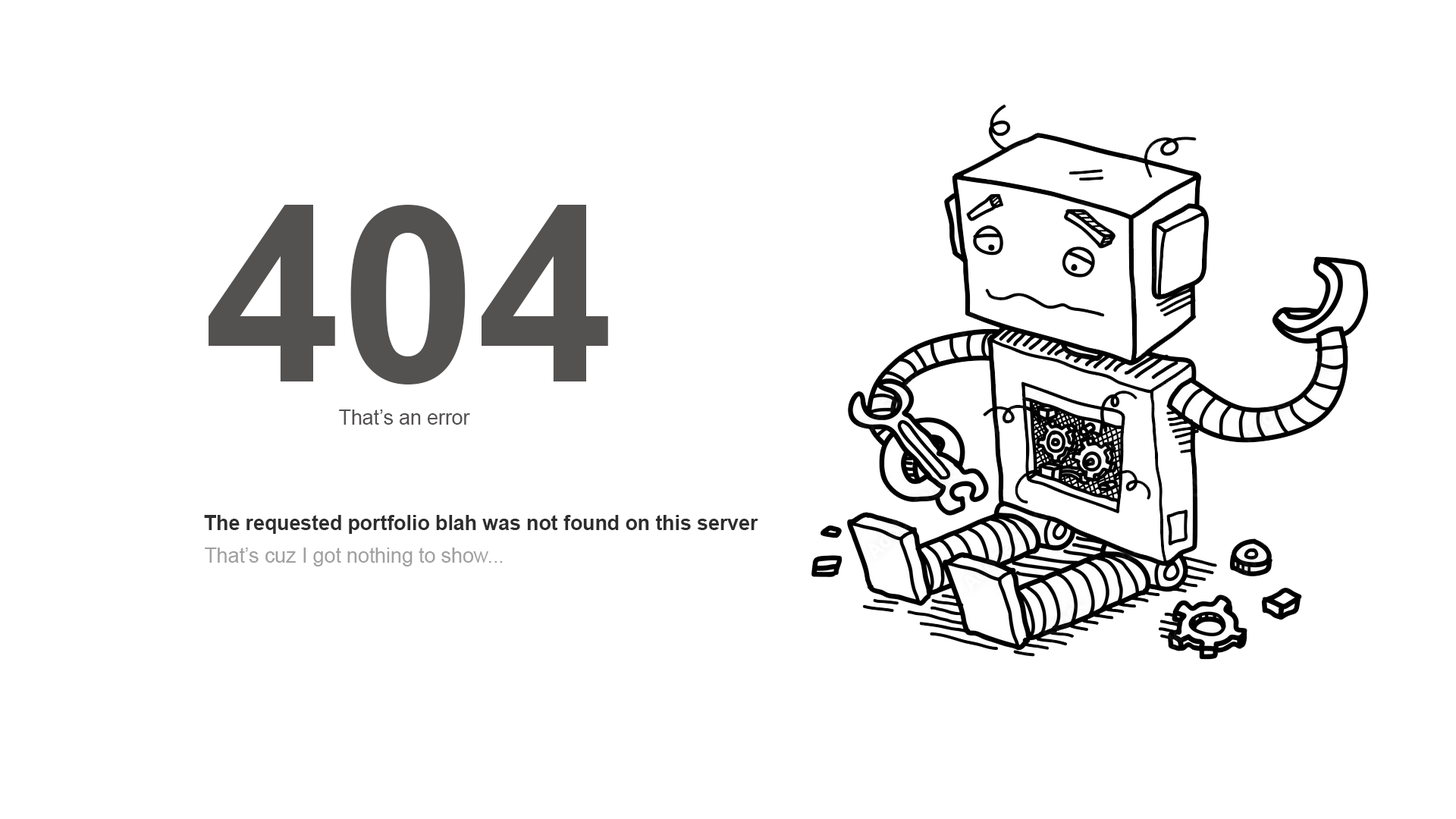
<style>
.page{position:relative;width:1456px;height:819px;background:#ffffff}
.page>*{position:absolute;margin:0}
.t1{font:245.7px "Arial-BoldMT";color:#545151}
.t2{font:20.2px "ArialMT";color:#545151}
.t3{font:20.2px "Arial-BoldMT";color:#2e2d2d}
.t4{font:20.2px "ArialMT";color:#a19f9f}
</style>
<div class="page">
<p class="t1" style="left:209px;top:205px;width:399px;height:179px">404</p>
<p class="t2" style="left:339px;top:409px;width:131px;height:16px">That’s an error</p>
<p class="t3" style="left:204px;top:515px;width:554px;height:19px">The requested portfolio blah was not found on this server</p>
<p class="t4" style="left:205px;top:548px;width:298px;height:18px">That’s cuz I got nothing to show...</p>
</div>
